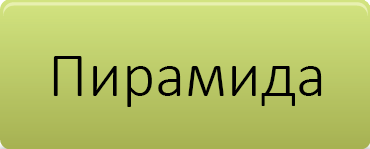
<style>
.page{position:relative;width:370px;height:149px}
.page>*{position:absolute;margin:0}
.t1{font:64px "Calibri-Light";color:#000000}
</style>
<div class="page">
<p class="t1" style="left:53px;top:56px;width:269px;height:51px">Пирамида</p>
</div>
